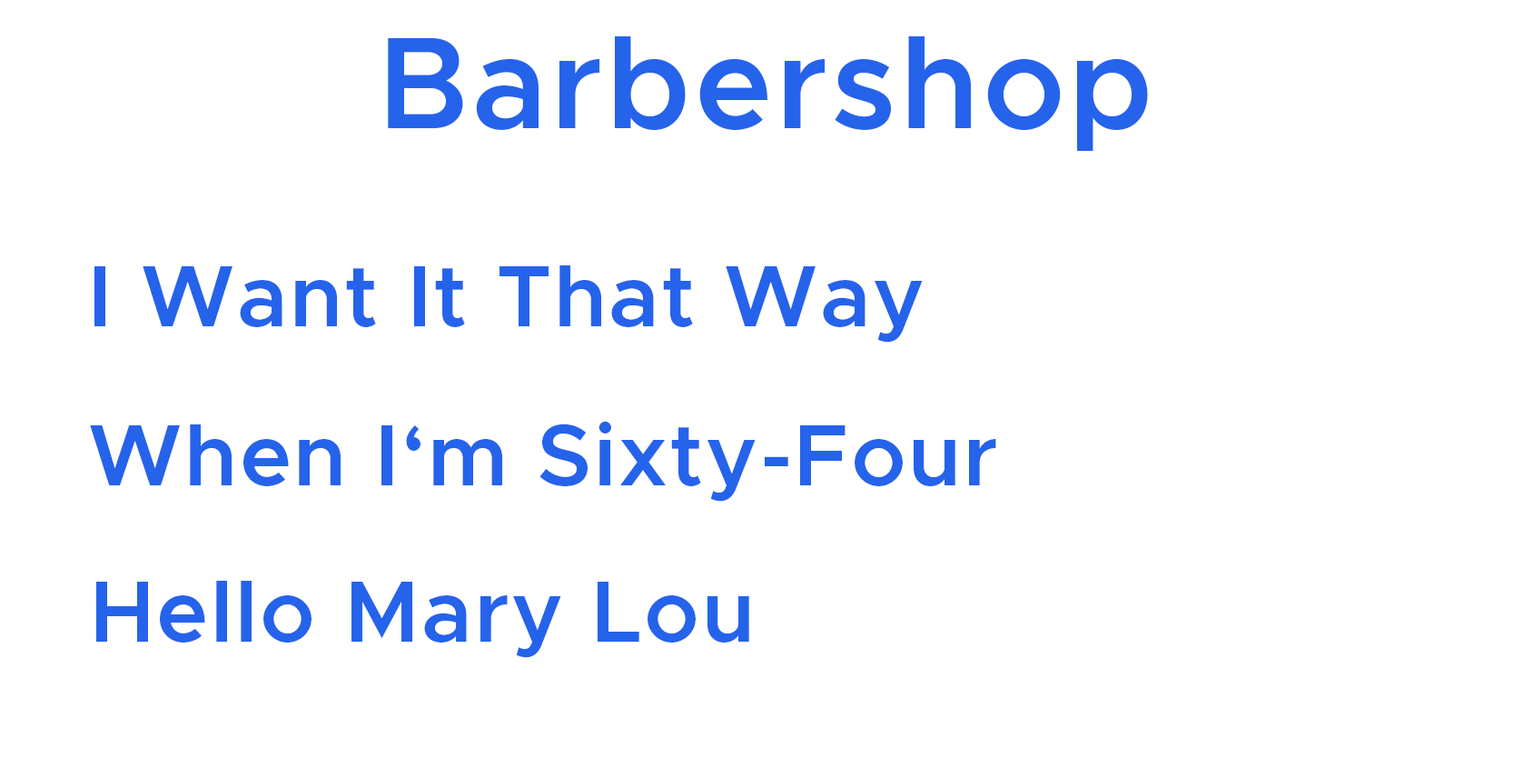
<style>
.page{position:relative;width:1533px;height:778px;background:#ffffff}
.page>*{position:absolute;margin:0}
.t1{font:130.8px "Metropolis-SemiBold";letter-spacing:0.025em;color:#2563eb}
.t2{font:87.2px "Metropolis-SemiBold";letter-spacing:0.025em;color:#2563eb}
</style>
<div class="page">
<p class="t1" style="left:388px;top:36px;width:760px;height:116px">Barbershop</p>
<p class="t2" style="left:94px;top:265px;width:829px;height:77px">I Want It That Way</p>
<p class="t2" style="left:90px;top:421px;width:907px;height:80px">When I‘m Sixty-Four</p>
<p class="t2" style="left:96px;top:580px;width:653px;height:78px">Hello Mary Lou</p>
</div>
